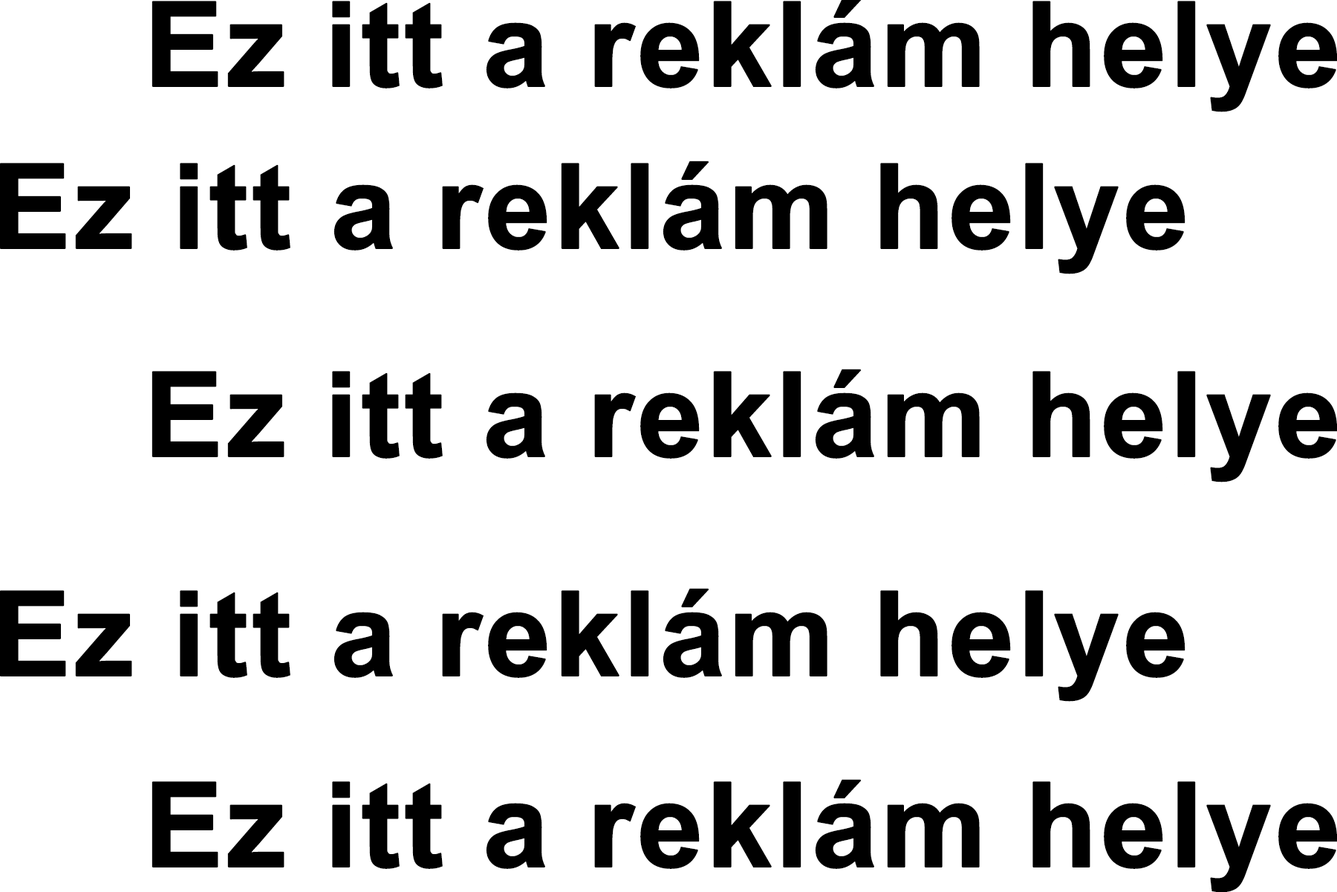
<style>
.page{position:relative;width:1337px;height:892px;background:#ffffff}
.page>*{position:absolute;margin:0}
.t1{font:118px "Arial-BoldMT";color:#000000;font-weight:bold}
</style>
<div class="page">
<p class="t1" style="left:152px;top:0px;width:1186px;height:112px">Ez itt a reklám helye</p>
<p class="t1" style="left:0px;top:160px;width:1186px;height:114px">Ez itt a reklám helye</p>
<p class="t1" style="left:152px;top:369px;width:1186px;height:113px">Ez itt a reklám helye</p>
<p class="t1" style="left:0px;top:588px;width:1186px;height:113px">Ez itt a reklám helye</p>
<p class="t1" style="left:152px;top:779px;width:1186px;height:113px">Ez itt a reklám helye</p>
</div>
